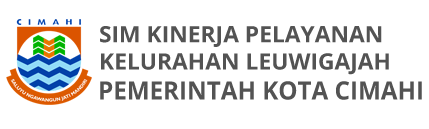
<style>
.page{position:relative;width:429px;height:129px;background:#ffffff}
.page>*{position:absolute;margin:0}
.t1{font:22.6px "OpenSans-Bold";color:#535353}
.t2{font:25.2px "OpenSans-Bold";color:#535353;scale:0.96 1}
</style>
<div class="page">
<p class="t1" style="left:100px;top:26px;width:289px;height:49px">SIM KINERJA PELAYANAN<br>KELURAHAN LEUWIGAJAH</p>
<p class="t2" style="left:100px;top:81px;width:322px;height:19px">PEMERINTAH KOTA CIMAHI</p>
</div>
